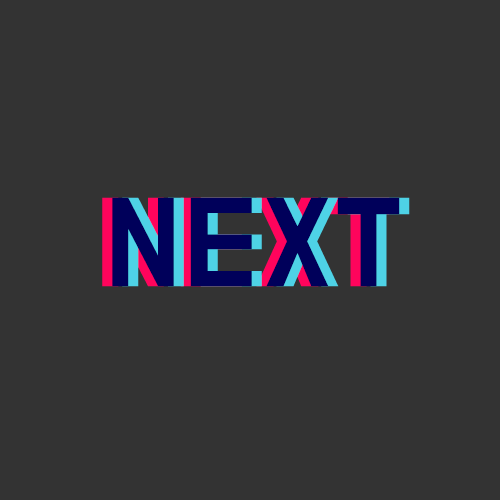
<style>
.page{position:relative;width:500px;height:500px;background:#333333}
.page>*{position:absolute;margin:0}
.t1{font:103.6px "BMDoHyeon-OTF";letter-spacing:0.05em}
.t2{font:103.6px "BMDoHyeon-OTF";letter-spacing:0.05em;color:#00005a}
</style>
<div class="page">
<p class="t1" style="left:102px;top:197px;width:288px;height:90px">NEXT</p>
<p class="t2" style="left:112px;top:197px;width:288px;height:90px">NEXT</p>
<p class="t1" style="left:122px;top:197px;width:288px;height:90px">NEXT</p>
</div>
